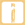
<style>
.page{position:relative;width:25px;height:25px;background:#ffffff}
.page>*{position:absolute;margin:0}
.t1{font:28px "Stroke";color:#f3c97f}
</style>
<div class="page">
<p class="t1" style="left:11px;top:3px;width:4px;height:20px">i</p>
</div>
